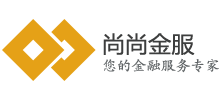
<style>
.page{position:relative;width:222px;height:104px;background:#ffffff}
.page>*{position:absolute;margin:0}
.t1{font:22.7px "MicrosoftYaHei";color:#3d3e3e}
.t2{font:14.5px "FZKTK--GBK1-0";color:#606466}
</style>
<div class="page">
<p class="t1" style="left:103px;top:33px;width:92px;height:22px">尚尚金服</p>
<p class="t2" style="left:103px;top:58px;width:116px;height:15px">您的金融服务专家</p>
</div>
